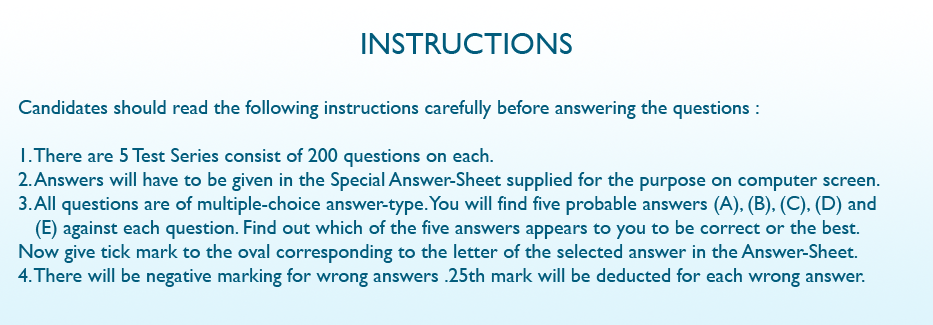
<style>
.page{position:relative;width:933px;height:325px}
.page>*{position:absolute;margin:0}
.t1{font:30.4px "GillSansMT";color:#025c7c}
.t2{font:20px "GillSansMT";color:#025c7c}
</style>
<div class="page">
<p class="t1" style="left:362px;top:33px;width:210px;height:21px">INSTRUCTIONS</p>
<p class="t2" style="left:18px;top:100px;width:862px;height:187px;text-align:justify">Candidates should read the following instructions carefully before answering the questions :<br><br>1. There are 5 Test Series consist of 200 questions on each.<br>2. Answers will have to be given in the Special Answer-Sheet supplied for the purpose on computer screen.<br>3. All questions are of multiple-choice answer-type. You will find five probable answers (A), (B), (C), (D) and<br>   (E) against each question. Find out which of the five answers appears to you to be correct or the best.<br>Now give tick mark to the oval corresponding to the letter of the selected answer in the Answer-Sheet.<br>4. There will be negative marking for wrong answers .25th mark will be deducted for each wrong answer.</p>
</div>
